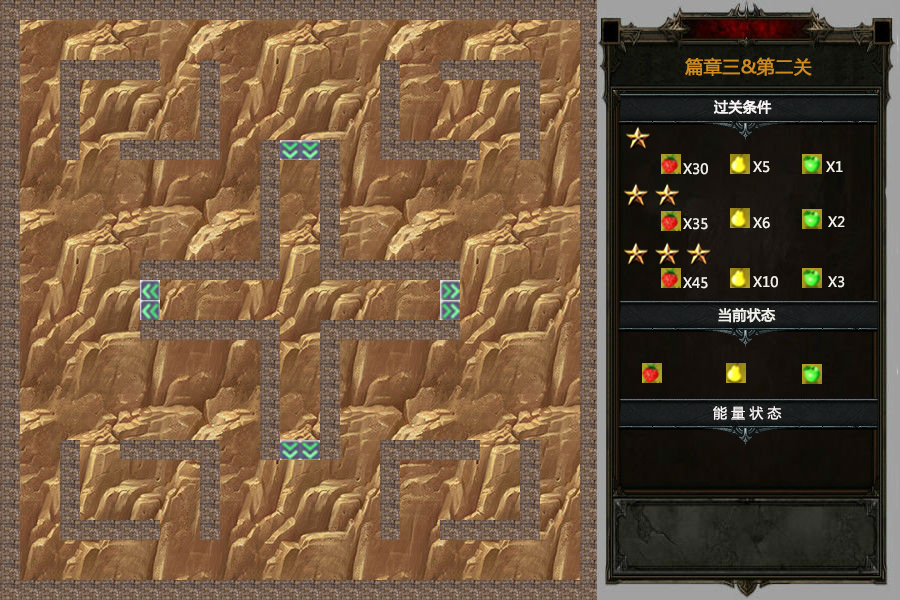
<style>
.page{position:relative;width:900px;height:600px}
.page>*{position:absolute;margin:0}
.t1{font:18px "MicrosoftYaHei";color:#cf8b20;font-weight:bold}
.t2{font:14px "MicrosoftYaHei";color:#f9f3f3;font-weight:bold}
.t3{font:14px "MicrosoftYaHei";color:#f1f0e9}
.t4{font:14px "MicrosoftYaHei";color:#f1f0e9;font-weight:bold}
.t5{font:14px "MicrosoftYaHei";color:#f9f3f3}
</style>
<div class="page">
<p class="t1" style="left:685px;top:57px;width:127px;height:19px">篇章三&amp;第二关</p>
<p class="t2" style="left:714px;top:100px;width:58px;height:15px">过关条件</p>
<p class="t3" style="left:753px;top:161px;width:17px;height:12px">X5</p>
<p class="t3" style="left:826px;top:161px;width:17px;height:11px">X1</p>
<p class="t3" style="left:683px;top:163px;width:25px;height:12px">X30</p>
<p class="t3" style="left:683px;top:218px;width:25px;height:12px">X35</p>
<p class="t3" style="left:753px;top:217px;width:17px;height:12px">X6</p>
<p class="t3" style="left:828px;top:216px;width:17px;height:11px">X2</p>
<p class="t3" style="left:683px;top:277px;width:25px;height:12px">X45</p>
<p class="t3" style="left:753px;top:276px;width:25px;height:12px">X10</p>
<p class="t3" style="left:828px;top:276px;width:17px;height:12px">X3</p>
<p class="t4" style="left:718px;top:308px;width:58px;height:15px">当前状态</p>
<p class="t5" style="left:713px;top:406px;width:69px;height:14px">能 量 状 态</p>
</div>
